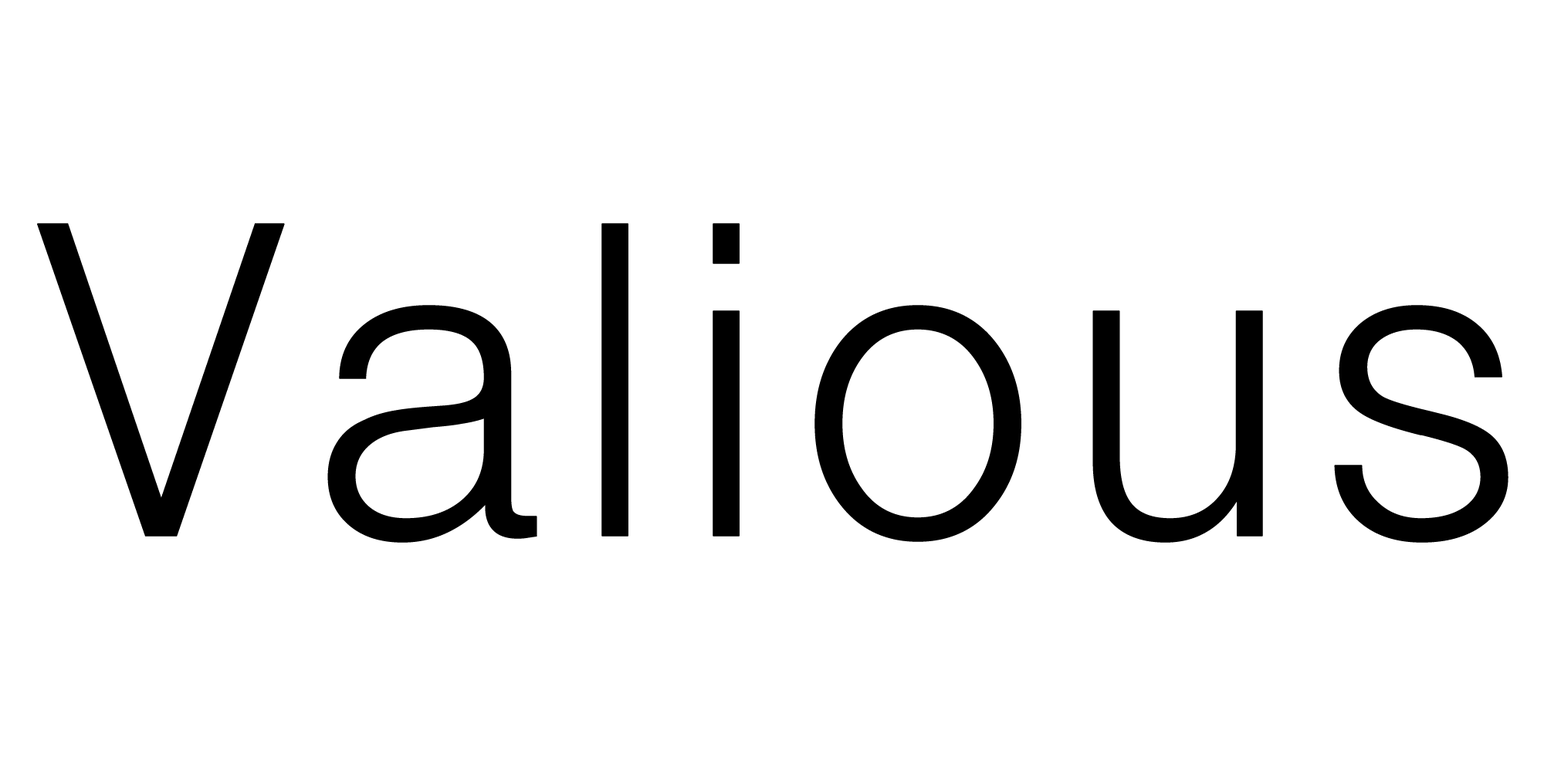
<style>
.page{position:relative;width:1544px;height:772px;background:#ffffff}
.page>*{position:absolute;margin:0}
.t1{font:432.1px "Dotum";color:#000000;font-weight:bold}
</style>
<div class="page">
<p class="t1" style="left:37px;top:223px;width:1472px;height:320px">Valious</p>
</div>
